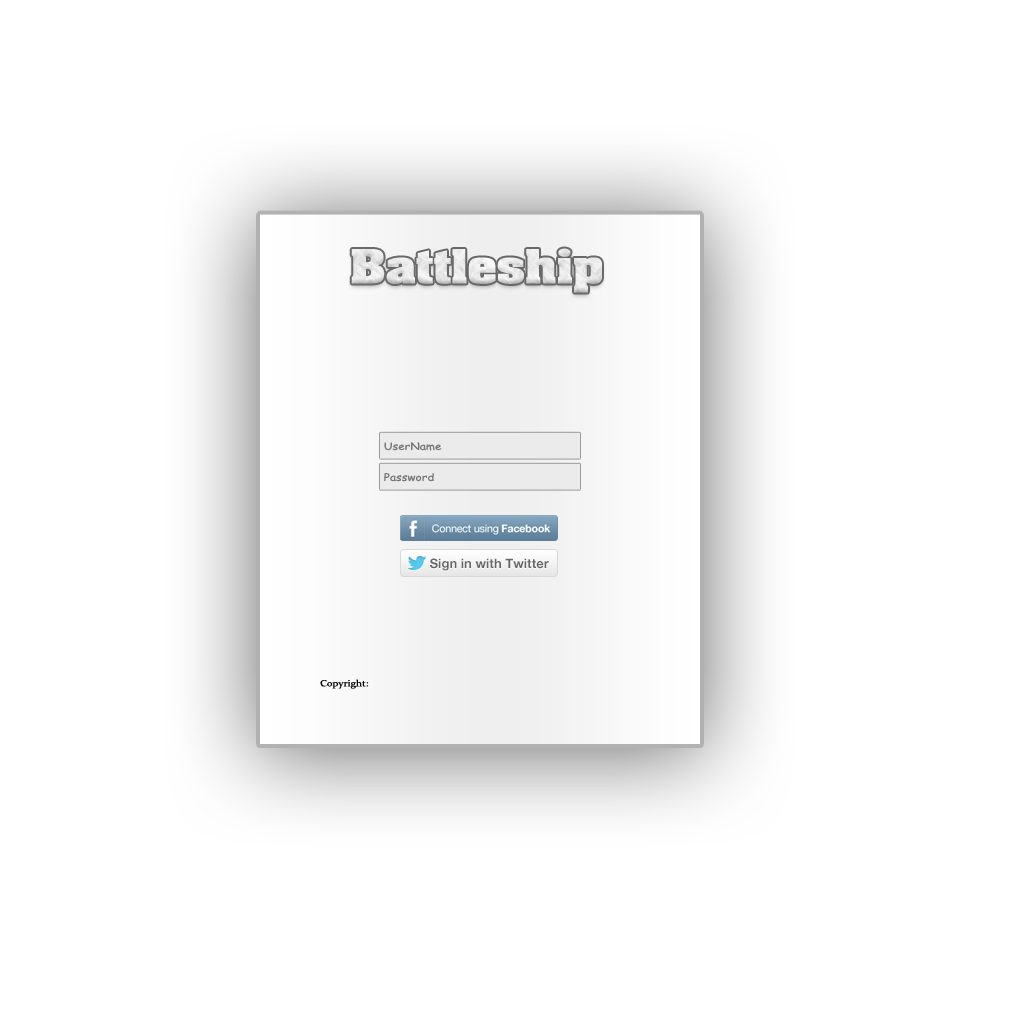
<style>
.page{position:relative;width:1020px;height:1020px;background:#ffffff}
.page>*{position:absolute;margin:0}
.t1{font:40px "BillboardRegularSWFTE";color:#e9e9e9;scale:1.18 1}
.t2{font:10px "ComicSansMS";color:#767676;scale:1.18 1}
.t3{font:9px "Constantia";color:#010101;scale:1.18 1}
</style>
<div class="page">
<p class="t1" style="left:351px;top:248px;width:251px;height:45px">Battleship</p>
<p class="t2" style="left:384px;top:442px;width:58px;height:9px">UserName</p>
<p class="t2" style="left:384px;top:473px;width:50px;height:9px">Password</p>
<p class="t3" style="left:320px;top:679px;width:49px;height:10px">Copyright:</p>
</div>
